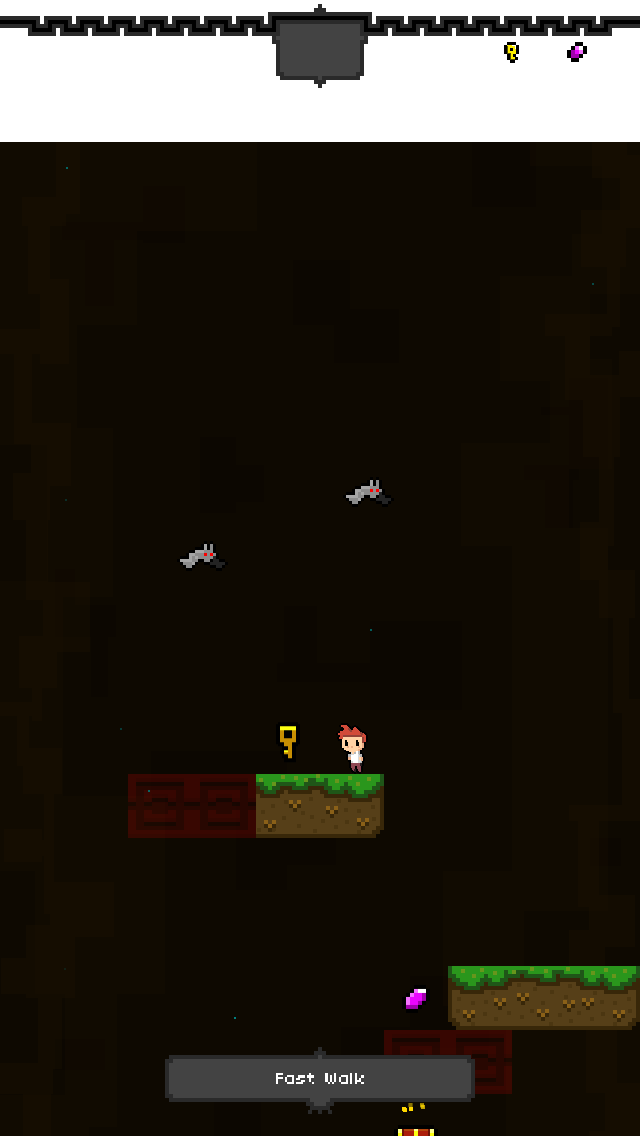
<style>
.page{position:relative;width:640px;height:1136px;background:#0e0901}
.page>*{position:absolute;margin:0}
.t1{font:18px "04b03";color:#ffffff}
</style>
<div class="page">
<p class="t1" style="left:276px;top:1073px;width:88px;height:11px">Fast Walk</p>
</div>
